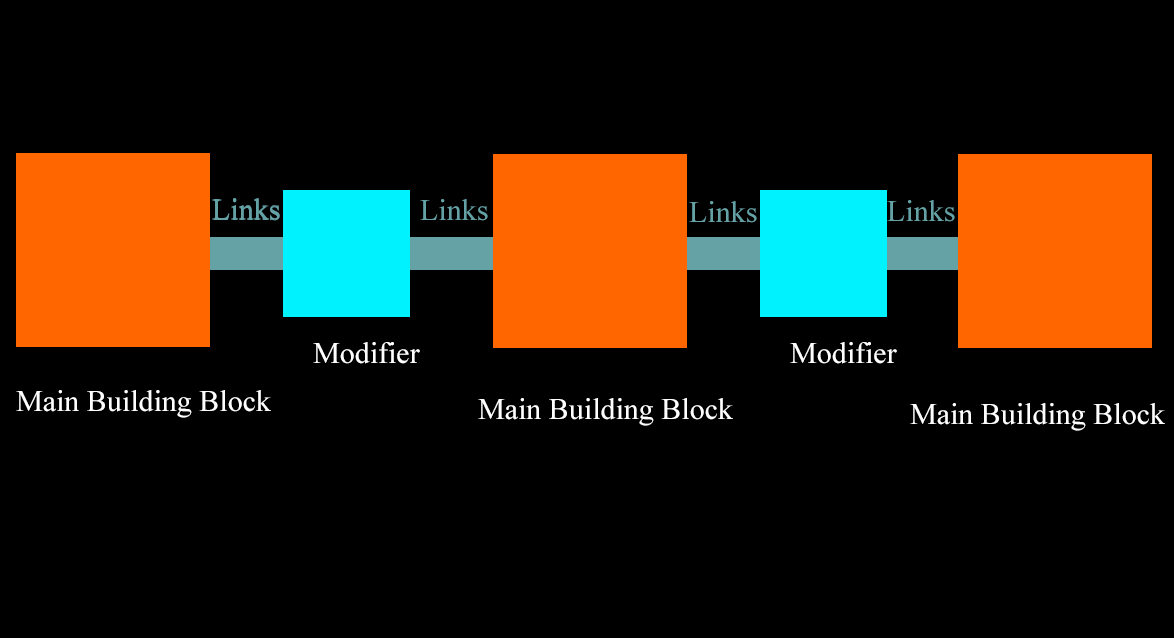
<style>
.page{position:relative;width:1174px;height:638px;background:#000000}
.page>*{position:absolute;margin:0}
.t1{font:30px "TimesNewRomanPSMT";color:#65a2a6}
.t2{font:30px "TimesNewRomanPSMT";color:#ffffff}
</style>
<div class="page">
<p class="t1" style="left:212px;top:198px;width:68px;height:22px">Links</p>
<p class="t1" style="left:212px;top:199px;width:68px;height:22px">Links</p>
<p class="t1" style="left:420px;top:199px;width:68px;height:22px">Links</p>
<p class="t1" style="left:689px;top:201px;width:68px;height:22px">Links</p>
<p class="t1" style="left:887px;top:200px;width:68px;height:22px">Links</p>
<p class="t2" style="left:313px;top:342px;width:107px;height:22px">Modifier</p>
<p class="t2" style="left:790px;top:342px;width:107px;height:22px">Modifier</p>
<p class="t2" style="left:16px;top:390px;width:255px;height:28px">Main Building Block</p>
<p class="t2" style="left:478px;top:398px;width:255px;height:28px">Main Building Block</p>
<p class="t2" style="left:910px;top:403px;width:255px;height:28px">Main Building Block</p>
</div>
